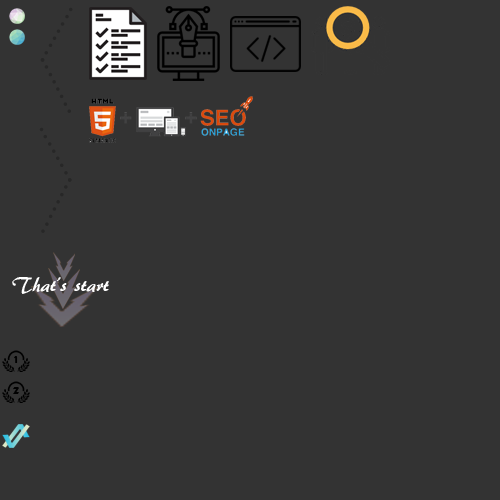
<style>
.page{position:relative;width:500px;height:500px;background:#333333}
.page>*{position:absolute;margin:0}
.t1{font:20px "ARBERKLEY";color:#ffffff}
.t2{font:10.8px "ARDESTINE";color:#000000}
</style>
<div class="page">
<p class="t1" style="left:12px;top:277px;width:97px;height:17px">That’s start</p>
<p class="t2" style="left:14px;top:356px;width:4px;height:7px">1</p>
<p class="t2" style="left:13px;top:387px;width:6px;height:7px">2</p>
</div>
